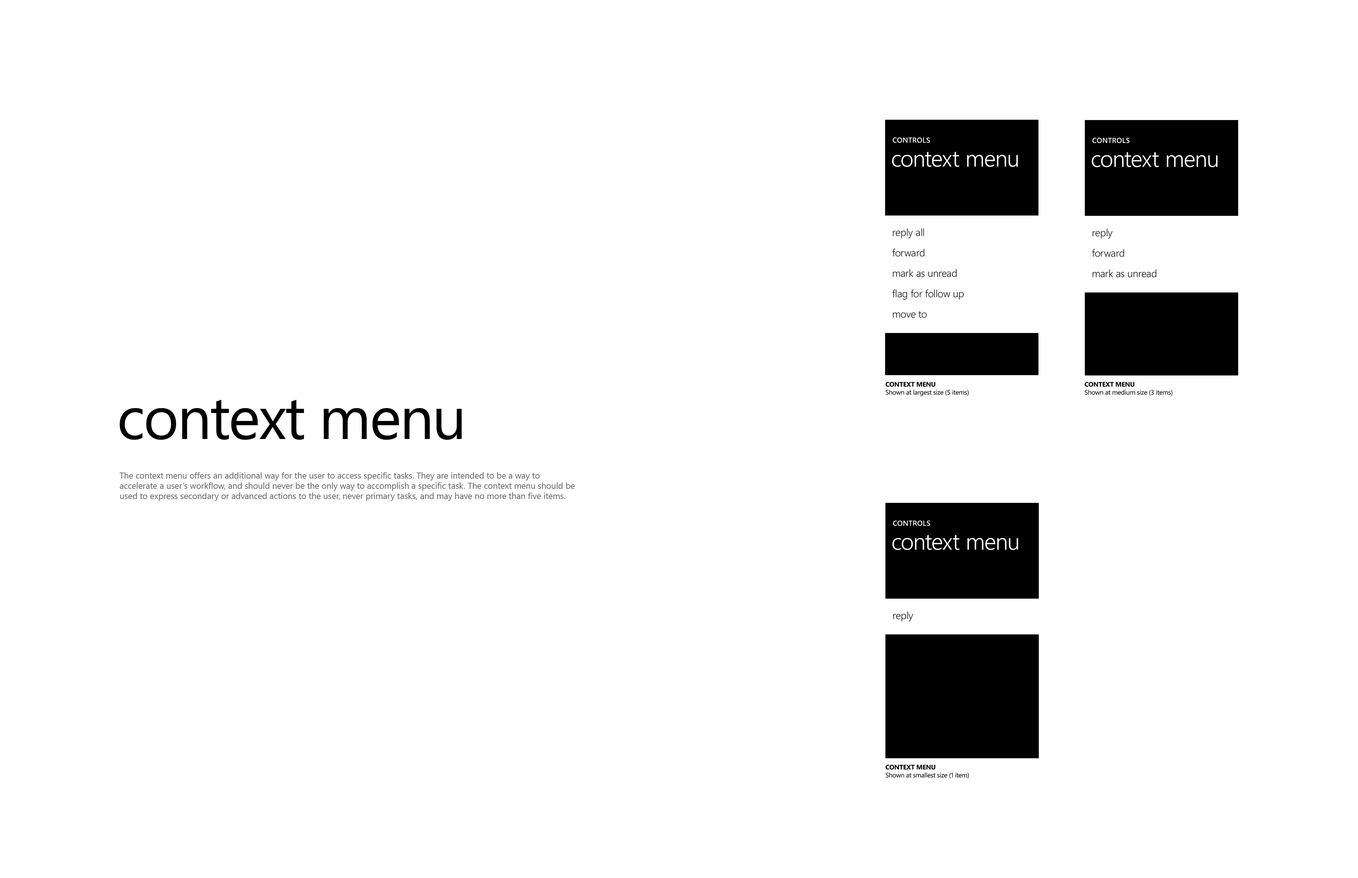
<style>
.page{position:relative;width:1358px;height:878px;background:#ffffff}
.page>*{position:absolute;margin:0}
.t1{font:7.2px "SegoeWP-Semibold";letter-spacing:0.025em;color:#ffffff;text-transform:uppercase}
.t2{font:23px "SegoeWP-SemiLight";letter-spacing:-0.01em;color:#ffffff}
.t3{font:10.2px/20.4px "SegoeWP-SemiLight";letter-spacing:-0.01em;color:#212121}
.t4{font:6.7px "SegoeWP";letter-spacing:-0.025em;color:#000000}
.t5{font:6.7px "SegoeWP-Bold";letter-spacing:-0.025em;color:#000000;text-transform:uppercase}
.t6{font:60.5px "SegoeWP";letter-spacing:-0.025em;color:#000000}
.t7{font:8.5px "SegoeUI";color:#666666}
.t8{font:10.2px "SegoeWP-SemiLight";letter-spacing:-0.01em;color:#212121}
</style>
<div class="page">
<p class="t1" style="left:892px;top:137px;width:37px;height:6px">controls</p>
<p class="t1" style="left:1092px;top:138px;width:37px;height:5px">controls</p>
<p class="t2" style="left:891px;top:152px;width:127px;height:15px">context menu</p>
<p class="t2" style="left:1091px;top:152px;width:126px;height:15px">context menu</p>
<p class="t3" style="left:892px;top:228px;width:72px;height:90px">reply all<br>forward<br>mark as unread<br>flag for follow up<br>move to</p>
<p class="t3" style="left:1091px;top:229px;width:65px;height:49px">reply<br>forward<br>mark as unread</p>
<p class="t4" style="left:885px;top:382px;width:83px;height:15px"><span class="t5">CONTEXT MENU<br></span>Shown at largest size (5 items)</p>
<p class="t4" style="left:1084px;top:382px;width:88px;height:14px"><span class="t5">context menu<br></span>Shown at medium size (3 items)</p>
<p class="t6" style="left:119px;top:400px;width:343px;height:40px">context menu</p>
<p class="t7" style="left:119px;top:472px;width:456px;height:29px">The context menu offers an additional way for the user to access specific tasks. They are intended to be a way to accelerate a user’s workflow, and should never be the only way to accomplish a specific task. The context menu should be used to express secondary or advanced actions to the user, never primary tasks, and may have no more than five items.</p>
<p class="t1" style="left:893px;top:521px;width:37px;height:5px">controls</p>
<p class="t2" style="left:892px;top:535px;width:126px;height:15px">context menu</p>
<p class="t8" style="left:893px;top:612px;width:20px;height:10px">reply</p>
<p class="t4" style="left:885px;top:765px;width:84px;height:14px"><span class="t5">context menu<br></span>Shown at smallest size (1 item)</p>
</div>
